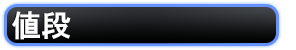
<style>
.page{position:relative;width:296px;height:50px}
.page>*{position:absolute;margin:0}
.t1{font:30px "HGGothicE";color:#fefefe}
</style>
<div class="page">
<p class="t1" style="left:12px;top:11px;width:59px;height:29px">値段</p>
</div>
